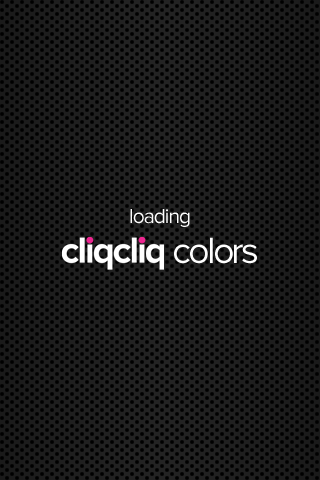
<style>
.page{position:relative;width:320px;height:480px;background:#000000}
.page>*{position:absolute;margin:0}
.t1{font:21px "ProximaNova-Regular";letter-spacing:-0.05em;color:#ffffff}
.t2{font:38px "ProximaNova-Regular";letter-spacing:-0.075em;color:#ffffff}
</style>
<div class="page">
<p class="t1" style="left:130px;top:209px;width:60px;height:18px">loading</p>
<p class="t2" style="left:174px;top:237px;width:83px;height:27px">colors</p>
</div>
